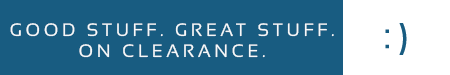
<style>
.page{position:relative;width:450px;height:75px;background:#185c81}
.page>*{position:absolute;margin:0}
.t1{font:18px "Sansation-Regular";letter-spacing:0.2em;color:#f6f9fa}
.t2{font:36px "Sansation-Regular";letter-spacing:0.2em;color:#185c81}
</style>
<div class="page">
<p class="t1" style="left:10px;top:23px;width:324px;height:35px;text-align:center">GOOD STUFF. GREAT STUFF.<br>ON CLEARANCE.</p>
<p class="t2" style="left:385px;top:23px;width:22px;height:32px">:)</p>
</div>
